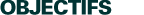
<style>
.page{position:relative;width:144px;height:15px;background:#ffffff}
.page>*{position:absolute;margin:0}
.t1{font:20px "Univers-Black";letter-spacing:-0.04em;color:#003333}
</style>
<div class="page">
<p class="t1" style="left:0px;top:0px;width:112px;height:15px">OBJECTIFS</p>
</div>
